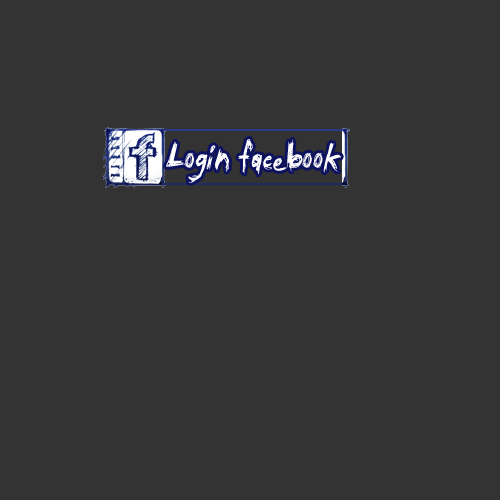
<style>
.page{position:relative;width:500px;height:500px;background:#333333}
.page>*{position:absolute;margin:0}
.t1{font:44.1px "TibetanBeefgardenAOE";color:#ffffff;scale:0.75 1}
</style>
<div class="page">
<p class="t1" style="left:166px;top:139px;width:175px;height:44px">Login facebook</p>
</div>
